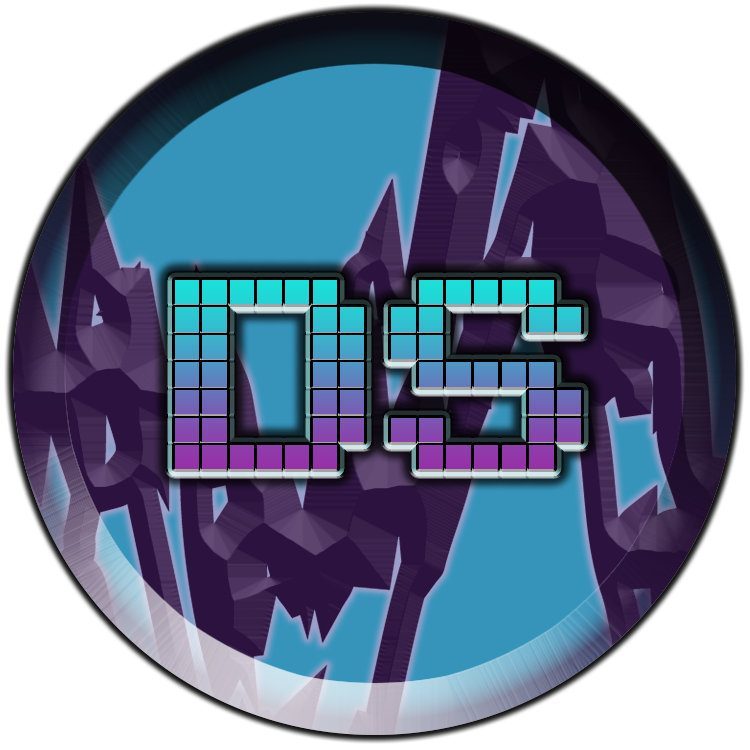
<style>
.page{position:relative;width:750px;height:750px;background:#ffffff}
.page>*{position:absolute;margin:0}
.t1{font:416.7px "Arcade"}
</style>
<div class="page">
<p class="t1" style="left:175px;top:280px;width:406px;height:189px">DS</p>
</div>
